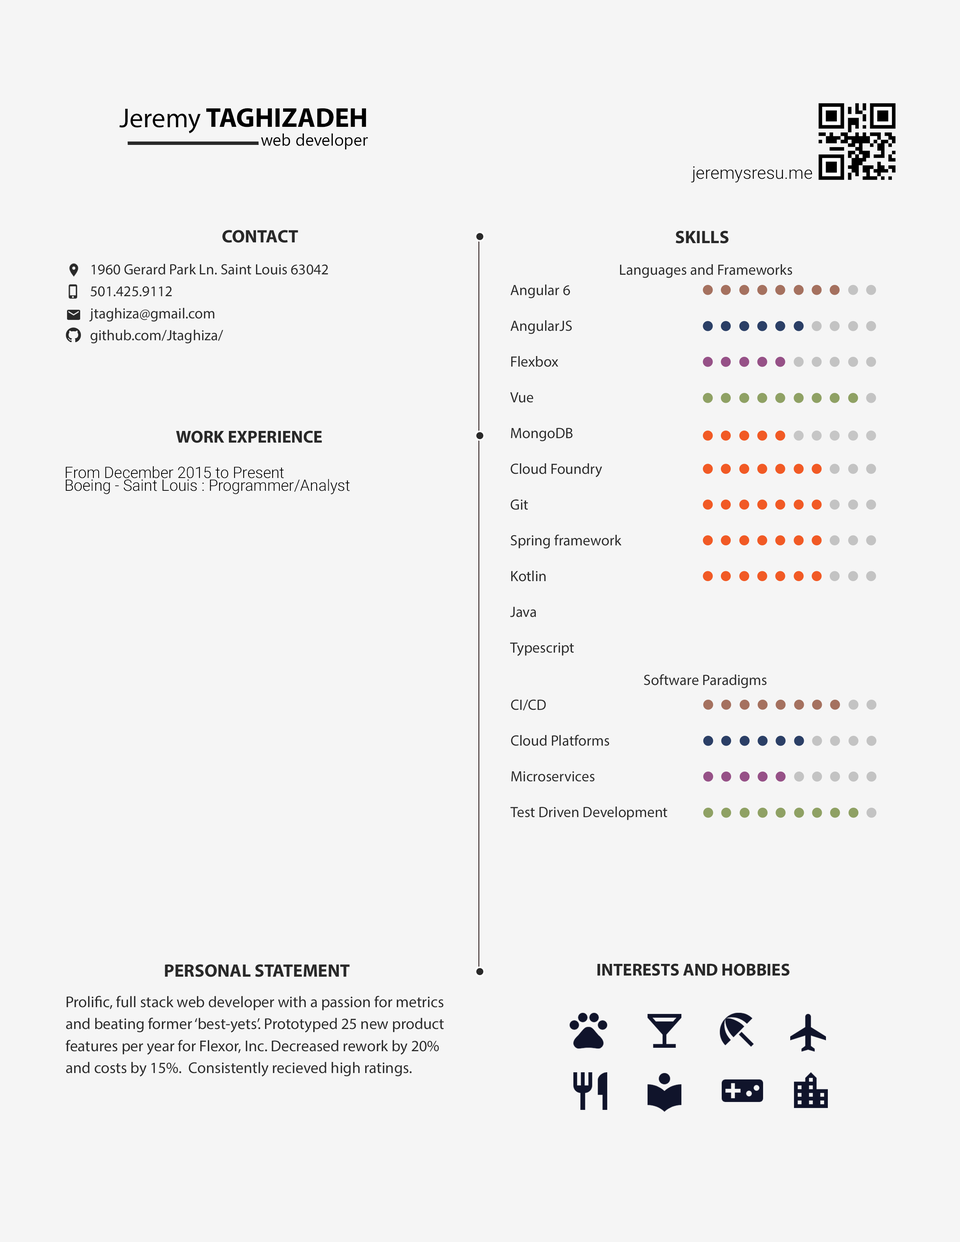
<style>
.page{position:relative;width:960px;height:1242px;background:#f5f5f5}
.page>*{position:absolute;margin:0}
.t1{font:27.4px "MyriadPro-Regular";color:#000000}
.t2{font:27.4px "MyriadPro-Bold";color:#000000}
.t3{font:16.5px "NirmalaUI";color:#000000}
.t4{font:17.3px "Roboto-Light";color:#000000}
.t5{font:18px "MyriadPro-Bold";color:#181818}
.t6{font:18px "MyriadPro-Bold";color:#292929}
.t7{font:14.9px/22px "MyriadPro-Regular";color:#2b2b2b}
.t8{font:14.9px "MyriadPro-Regular";color:#2b2b2b}
.t9{font:17.3px "MyriadPro-Bold";color:#292929}
.t10{font:15.7px/12.6px "Roboto-Light";color:#000000}
.t11{font:15.7px/22px "MyriadPro-Regular";color:#2b2b2b}
</style>
<div class="page">
<p class="t1" style="left:119px;top:109px;width:82px;height:24px">Jeremy</p>
<p class="t2" style="left:206px;top:108px;width:160px;height:19px">TAGHIZADEH</p>
<p class="t3" style="left:261px;top:133px;width:107px;height:16px">web developer</p>
<p class="t4" style="left:691px;top:166px;width:121px;height:17px">jeremysresu.me</p>
<p class="t5" style="left:222px;top:230px;width:76px;height:13px">CONTACT</p>
<p class="t6" style="left:676px;top:231px;width:52px;height:13px">SKILLS</p>
<p class="t7" style="left:89px;top:264px;width:239px;height:80px">1960 Gerard Park Ln. Saint Louis 63042<br>501.425.9112<br>jtaghiza@gmail.com<br>github.com/Jtaghiza/</p>
<p class="t8" style="left:620px;top:264px;width:172px;height:14px">Languages and Frameworks</p>
<p class="t8" style="left:510px;top:285px;width:111px;height:371px">Angular 6<br><br>AngularJS<br><br>Flexbox<br><br>Vue<br><br>MongoDB<br><br>Cloud Foundry<br><br>Git<br><br>Spring framework<br><br>Kotlin<br><br>Java<br><br>Typescript</p>
<p class="t9" style="left:176px;top:431px;width:146px;height:12px">WORK EXPERIENCE</p>
<p class="t10" style="left:65px;top:466px;width:285px;height:28px">From December 2015 to Present<br>Boeing - Saint Louis : Programmer/Analyst</p>
<p class="t8" style="left:644px;top:674px;width:122px;height:14px">Software Paradigms</p>
<p class="t8" style="left:510px;top:699px;width:157px;height:121px">CI/CD<br><br>Cloud Platforms<br><br>Microservices<br><br>Test Driven Development</p>
<p class="t5" style="left:165px;top:964px;width:185px;height:13px">PERSONAL STATEMENT</p>
<p class="t9" style="left:597px;top:964px;width:192px;height:12px">INTERESTS AND HOBBIES</p>
<p class="t11" style="left:65px;top:996px;width:379px;height:81px">Prolific, full stack web developer with a passion for metrics and beating former ‘best-yets’. Prototyped 25 new product features per year for Flexor, Inc. Decreased rework by 20% and costs by 15%.  Consistently recieved high ratings.</p>
</div>
